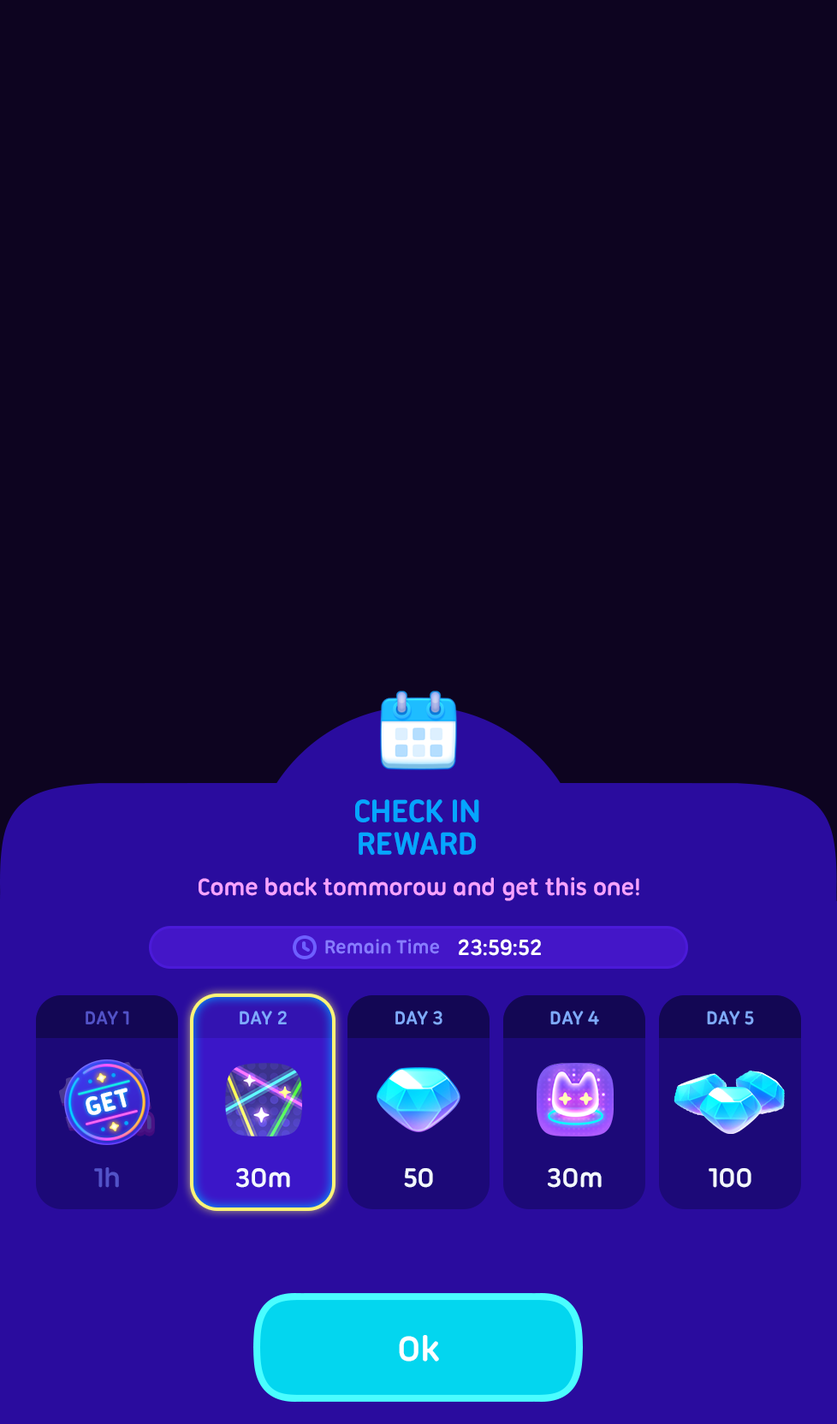
<style>
.page{position:relative;width:837px;height:1424px;background:#0d0420}
.page>*{position:absolute;margin:0}
.t1{font:34.2px/32.5px "UbuntuTitling-Bold";letter-spacing:-0.025em;color:#05a5ff;text-transform:uppercase}
.t2{font:25.7px "UbuntuTitling-Bold";letter-spacing:-0.025em;color:#f7a2ff}
.t3{font:20.5px "UbuntuTitling-Bold";letter-spacing:-0.025em;color:#887cff}
.t4{font:24px "UbuntuTitling-Bold";letter-spacing:-0.025em;color:#ffffff;text-transform:uppercase}
.t5{font:20.5px "UbuntuTitling-Bold";letter-spacing:-0.025em;color:#5252c8;text-transform:uppercase}
.t6{font:20.5px "UbuntuTitling-Bold";letter-spacing:-0.025em;color:#7faaff;text-transform:uppercase}
.t7{font:27.2px "UbuntuTitling-Bold";letter-spacing:-0.025em;color:#ffffff;text-transform:uppercase;font-weight:bold}
.t8{font:29.1px "UbuntuTitling-Bold";letter-spacing:-0.025em;color:#5252c8}
.t9{font:29.1px "UbuntuTitling-Bold";letter-spacing:-0.025em;color:#f3f7ff}
.t10{font:37.7px "UbuntuTitling-Bold";letter-spacing:-0.025em;color:#ffffff}
</style>
<div class="page">
<p class="t1" style="left:355px;top:799px;width:124px;height:56px;text-align:center">Check In<br>Reward</p>
<p class="t2" style="left:199px;top:877px;width:440px;height:24px">Come back tommorow and get this one!</p>
<p class="t3" style="left:325px;top:939px;width:114px;height:15px">Remain Time</p>
<p class="t4" style="left:459px;top:939px;width:82px;height:17px">23:59:52</p>
<p class="t5" style="left:86px;top:1011px;width:43px;height:14px">day 1</p>
<p class="t6" style="left:240px;top:1011px;width:47px;height:14px">day 2</p>
<p class="t6" style="left:395px;top:1011px;width:48px;height:14px">day 3</p>
<p class="t6" style="left:550px;top:1011px;width:49px;height:14px">day 4</p>
<p class="t6" style="left:707px;top:1011px;width:47px;height:14px">day 5</p>
<p class="t7" style="left:86px;top:1088px;width:42px;height:27px;rotate:-15deg">Get</p>
<p class="t8" style="left:94px;top:1168px;width:25px;height:20px">1h</p>
<p class="t9" style="left:236px;top:1168px;width:54px;height:20px">30m</p>
<p class="t9" style="left:404px;top:1168px;width:29px;height:20px">50</p>
<p class="t9" style="left:548px;top:1168px;width:54px;height:20px">30m</p>
<p class="t9" style="left:709px;top:1168px;width:43px;height:20px">100</p>
<p class="t10" style="left:399px;top:1335px;width:40px;height:27px">Ok</p>
</div>
